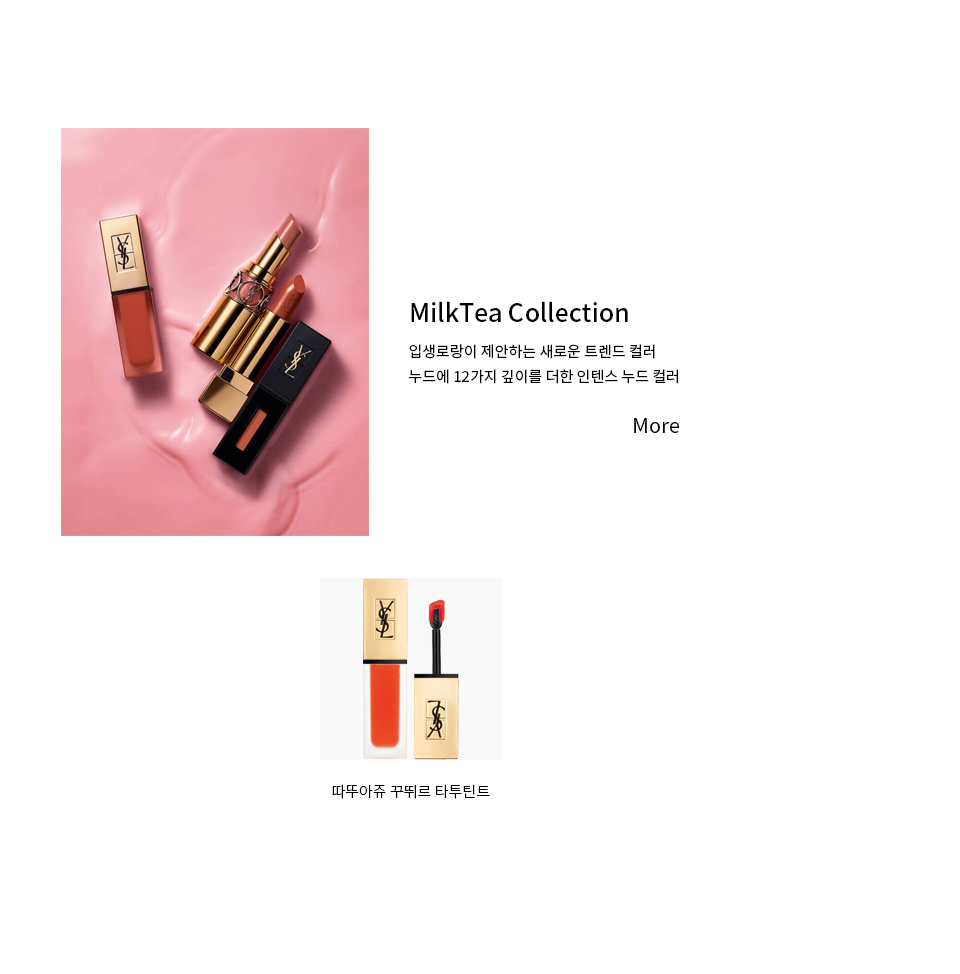
<style>
.page{position:relative;width:960px;height:974px;background:#ffffff}
.page>*{position:absolute;margin:0}
.t1{font:25px "NotoSansKR-Medium";color:#000000}
.t2{font:15px/25px "NotoSansKR-Regular";color:#000000}
.t3{font:20px "NotoSansKR-Regular";color:#000000}
.t4{font:15px "NotoSansKR-Light";color:#000000}
</style>
<div class="page">
<p class="t1" style="left:411px;top:301px;width:217px;height:21px">MilkTea Collection</p>
<p class="t2" style="left:408px;top:344px;width:270px;height:40px">입생로랑이 제안하는 새로운 트렌드 컬러 <br>누드에 12가지 깊이를 더한 인텐스 누드 컬러</p>
<p class="t3" style="left:634px;top:418px;width:45px;height:15px">More</p>
<p class="t4" style="left:332px;top:784px;width:158px;height:15px">따뚜아쥬 꾸뛰르 타투틴트</p>
</div>
